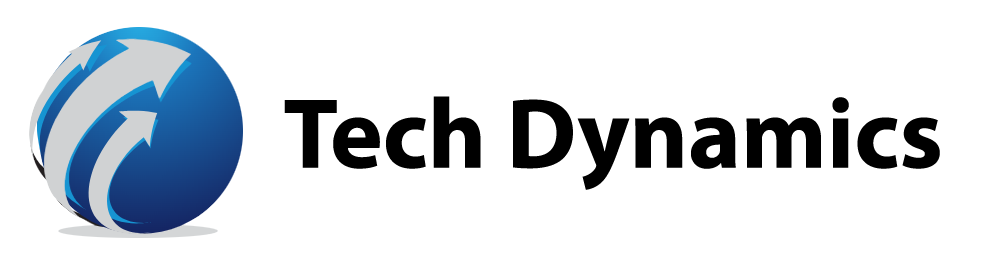
<style>
.page{position:relative;width:982px;height:258px;background:#ffffff}
.page>*{position:absolute;margin:0}
.t1{font:100px "MyriadPro-Bold";color:#000000}
</style>
<div class="page">
<p class="t1" style="left:284px;top:96px;width:656px;height:94px">Tech Dynamics</p>
</div>
